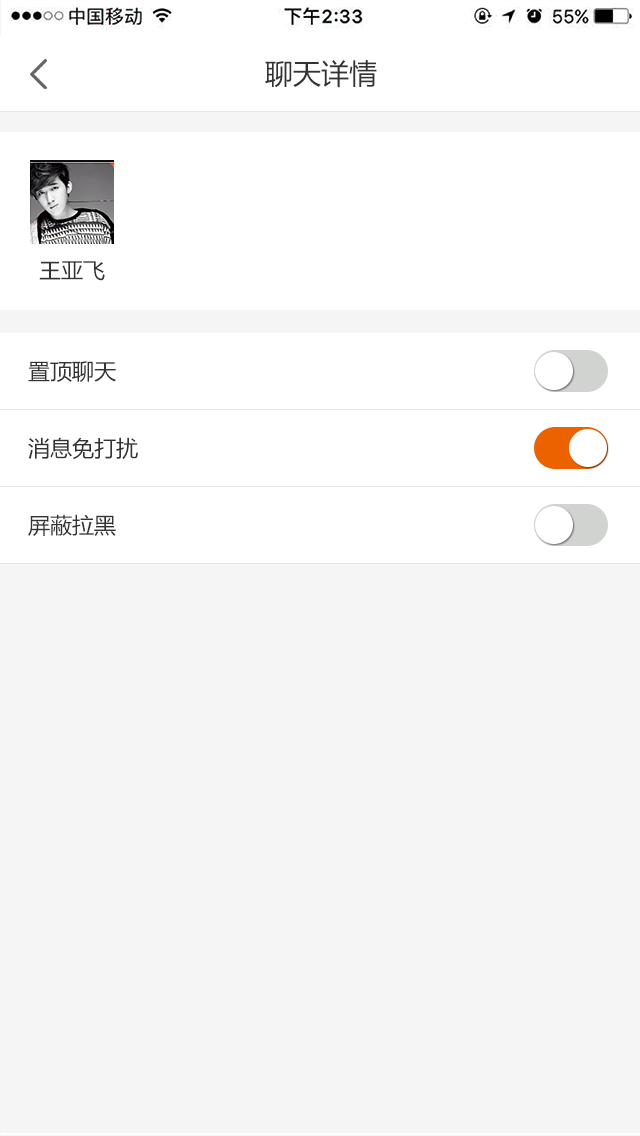
<style>
.page{position:relative;width:640px;height:1136px;background:#f5f5f5}
.page>*{position:absolute;margin:0}
.t1{font:28px "MicrosoftYaHei";color:#333333}
.t2{font:22px "MicrosoftYaHei";color:#333333}
</style>
<div class="page">
<p class="t1" style="left:265px;top:60px;width:112px;height:28px">聊天详情</p>
<p class="t2" style="left:39px;top:261px;width:66px;height:20px">王亚飞</p>
<p class="t2" style="left:28px;top:361px;width:88px;height:21px">置顶聊天</p>
<p class="t2" style="left:28px;top:437px;width:110px;height:23px">消息免打扰</p>
<p class="t2" style="left:28px;top:514px;width:88px;height:22px">屏蔽拉黑</p>
</div>
